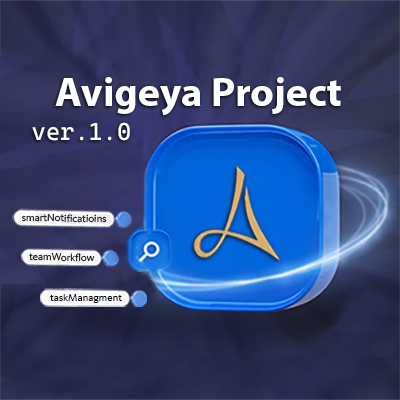
<style>
.page{position:relative;width:400px;height:400px}
.page>*{position:absolute;margin:0}
.t1{font:41px "MyriadPro-Bold";color:#ffffff}
.t2{font:24.4px "CascadiaMono-Regular";color:#ffffff}
.t3{font:10.4px "KievitOffcPro";letter-spacing:-0.025em;scale:1.09 1}
.t4{font:10.4px "KievitOffcPro";letter-spacing:-0.025em;color:#000000;scale:1.09 1}
</style>
<div class="page">
<p class="t1" style="left:55px;top:77px;width:286px;height:39px">Avigeya Project</p>
<p class="t2" style="left:32px;top:122px;width:98px;height:19px">ver.1.0</p>
<p class="t3" style="left:22px;top:213px;width:85px;height:10px;rotate:1deg">smartNotificatioins</p>
<p class="t4" style="left:29px;top:252px;width:66px;height:10px;rotate:1deg">teamWorkflow</p>
<p class="t4" style="left:50px;top:294px;width:72px;height:9px">taskManagment</p>
</div>
